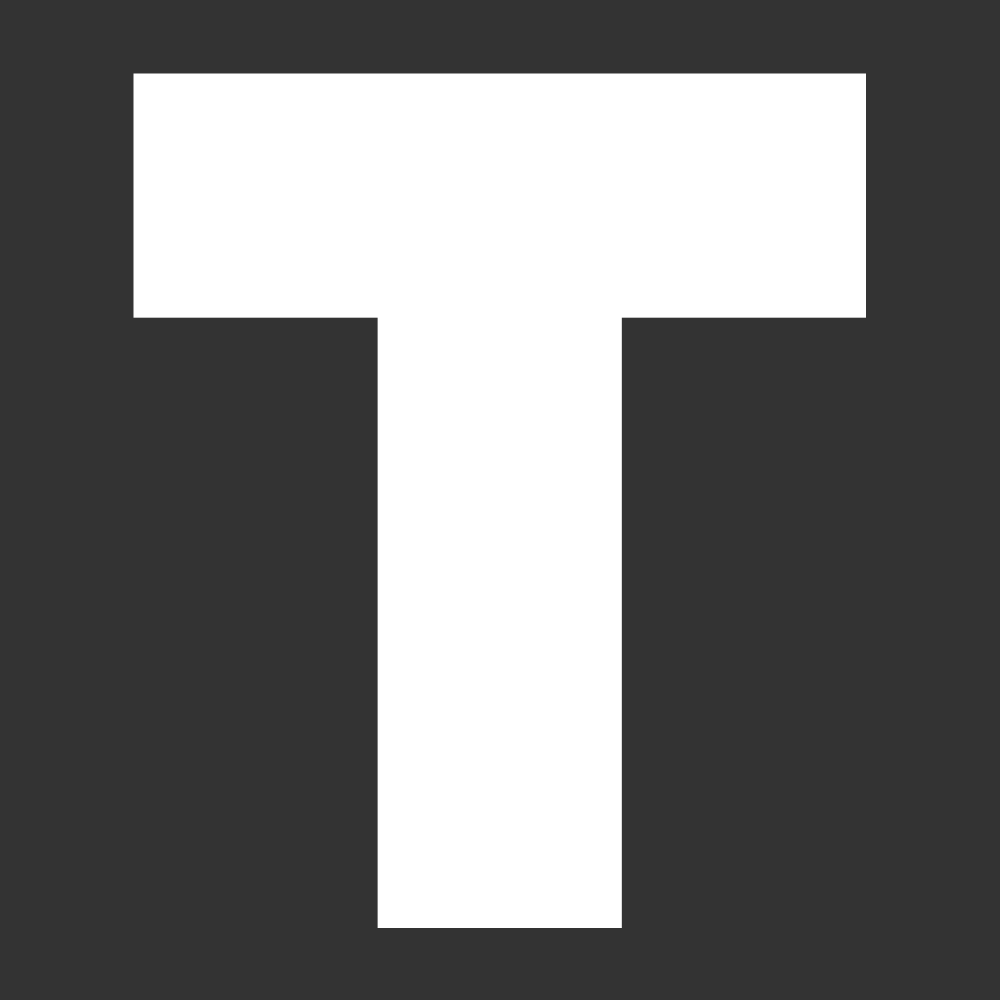
<style>
.page{position:relative;width:1000px;height:1000px;background:#333333}
.page>*{position:absolute;margin:0}
.t1{font:1250px "NeonOverdrive";letter-spacing:0.01em;color:#ffffff}
</style>
<div class="page">
<p class="t1" style="left:133px;top:73px;width:733px;height:855px">T</p>
</div>
